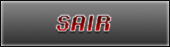
<style>
.page{position:relative;width:170px;height:47px}
.page>*{position:absolute;margin:0}
.t1{font:22.6px "DIGIMON"}
</style>
<div class="page">
<p class="t1" style="left:56px;top:15px;width:55px;height:16px">sair</p>
</div>
